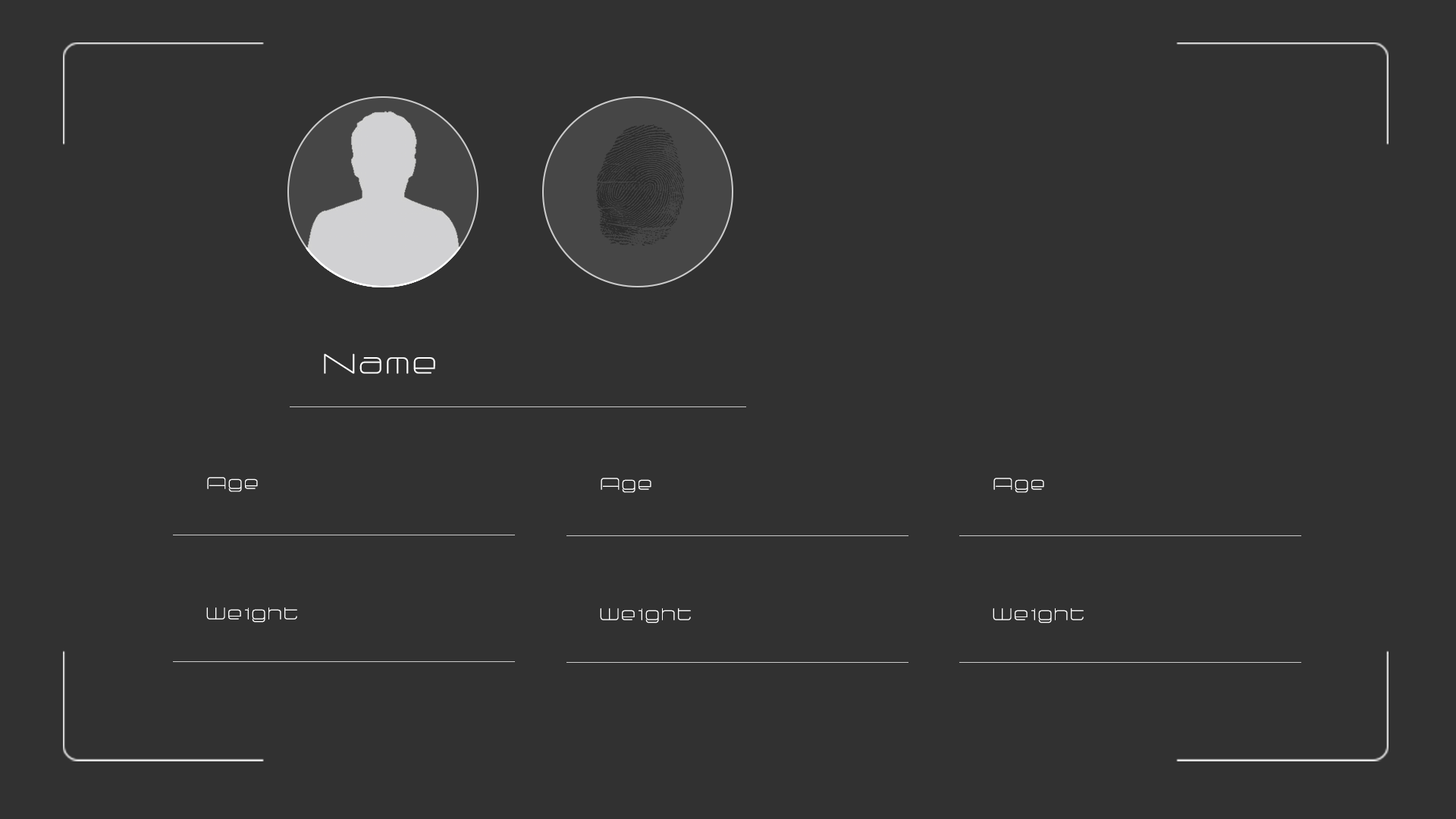
<style>
.page{position:relative;width:1456px;height:819px;background:#313131}
.page>*{position:absolute;margin:0}
.t1{font:18.2px "Radio187.5";letter-spacing:0.25em;color:#ffffff;font-weight:bold}
.t2{font:10.8px "Radio187.5";letter-spacing:0.25em;color:#ffffff;font-weight:bold}
</style>
<div class="page">
<p class="t1" style="left:324px;top:353px;width:111px;height:21px">Name</p>
<p class="t2" style="left:207px;top:477px;width:51px;height:15px">Age</p>
<p class="t2" style="left:601px;top:478px;width:50px;height:15px">Age</p>
<p class="t2" style="left:993px;top:478px;width:51px;height:15px">Age</p>
<p class="t2" style="left:206px;top:607px;width:91px;height:16px">Weight</p>
<p class="t2" style="left:600px;top:608px;width:91px;height:15px">Weight</p>
<p class="t2" style="left:993px;top:608px;width:91px;height:15px">Weight</p>
</div>
